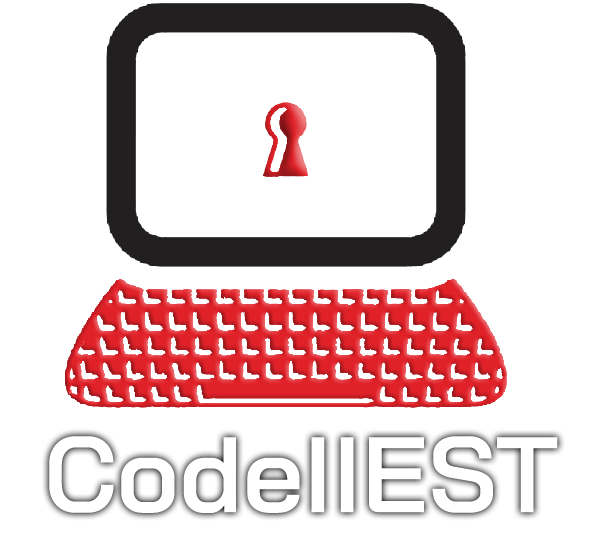
<style>
.page{position:relative;width:593px;height:534px;background:#ffffff}
.page>*{position:absolute;margin:0}
.t1{font:106.8px "BaiJamjuree-SemiBold";color:#ffffff}
</style>
<div class="page">
<p class="t1" style="left:49px;top:436px;width:509px;height:77px">CodeIIEST</p>
</div>
